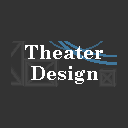
<style>
.page{position:relative;width:128px;height:128px;background:#333333}
.page>*{position:absolute;margin:0}
.t1{font:19px/21px "CenturySchoolbook-Bold";color:#ffffff}
</style>
<div class="page">
<p class="t1" style="left:25px;top:45px;width:78px;height:39px;text-align:center">Theater<br>Design</p>
</div>
